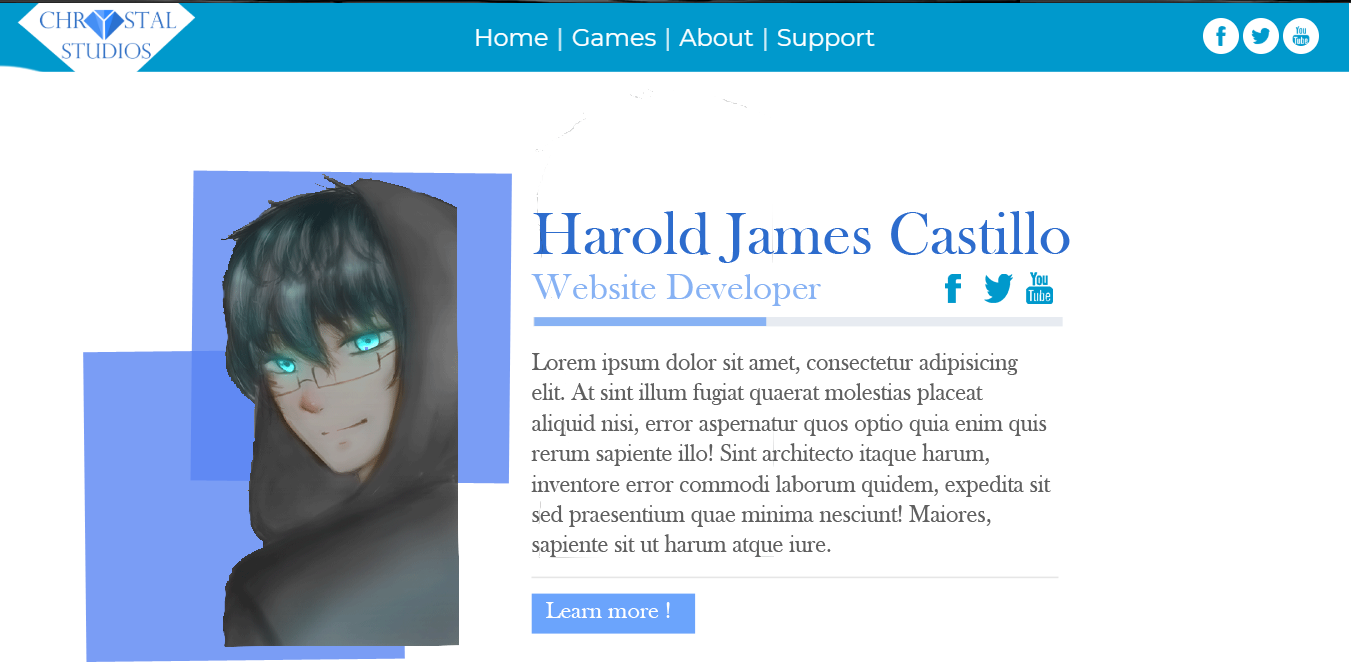
<style>
.page{position:relative;width:1351px;height:662px;background:#ffffff}
.page>*{position:absolute;margin:0}
.t1{font:62px "BaskOldFace";color:#2d6ccd}
.t2{font:37.3px "BaskOldFace";color:#87b2f4}
.t3{font:25.3px "BaskOldFace";color:#5f5f5f;scale:0.94 1}
</style>
<div class="page">
<p class="t1" style="left:531px;top:211px;width:539px;height:95px">Harold James Castillo<br><span class="t2">Website Developer</span></p>
<p class="t3" style="left:531px;top:353px;width:520px;height:204px">Lorem ipsum dolor sit amet, consectetur adipisicing elit. At sint illum fugiat quaerat molestias placeat aliquid nisi, error aspernatur quos optio quia enim quis rerum sapiente illo! Sint architecto itaque harum, inventore error commodi laborum quidem, expedita sit sed praesentium quae minima nesciunt! Maiores, sapiente sit ut harum atque iure.</p>
</div>
